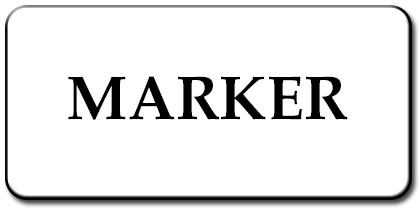
<style>
.page{position:relative;width:420px;height:210px;background:#ffffff}
.page>*{position:absolute;margin:0}
.t1{font:61.4px "PalatinoLinotype-Bold";color:#000000}
</style>
<div class="page">
<p class="t1" style="left:68px;top:76px;width:280px;height:44px">MARKER</p>
</div>
